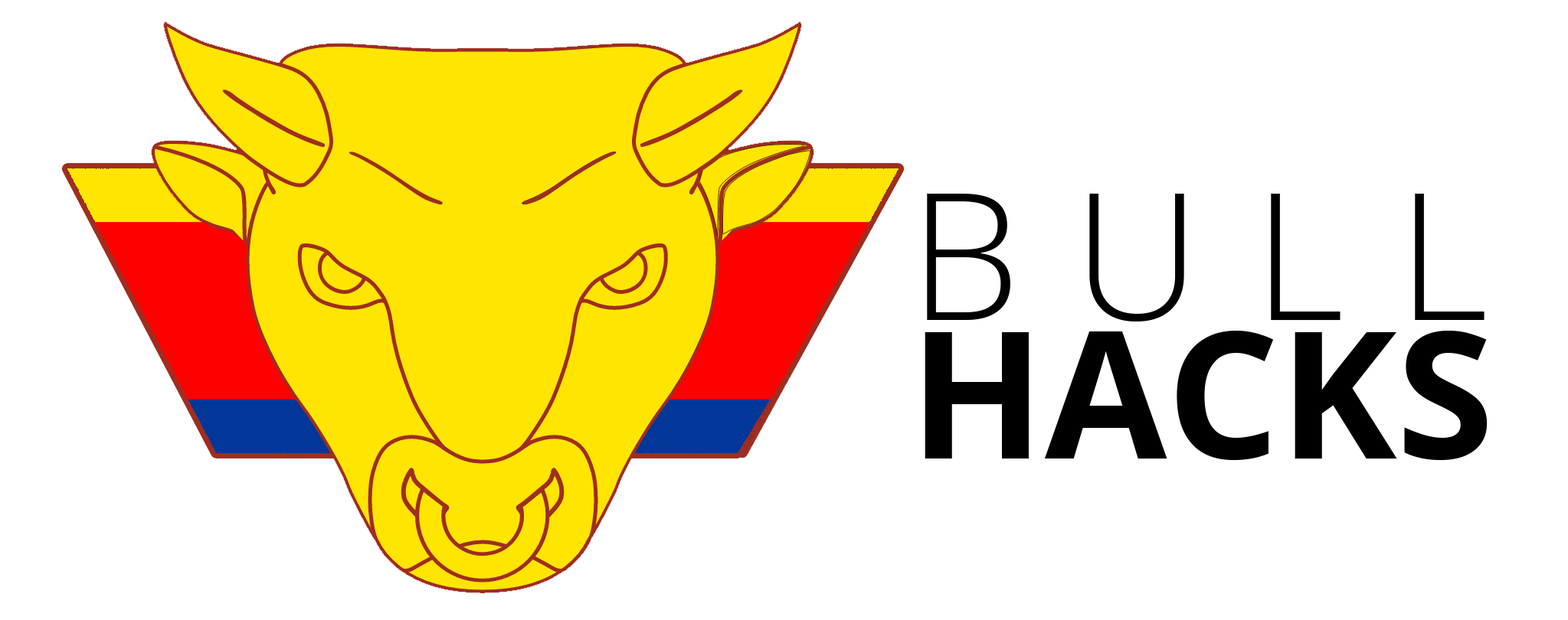
<style>
.page{position:relative;width:1568px;height:620px;background:#ffffff}
.page>*{position:absolute;margin:0}
.t1{font:176.6px/139.3px "OpenSans-Bold";color:#000000}
.t2{font:176.6px/139.3px "OpenSans-Light";letter-spacing:0.3em;color:#000000}
</style>
<div class="page">
<p class="t1" style="left:925px;top:194px;width:563px;height:266px"><span class="t2">BULL<br></span>HACKS</p>
</div>
